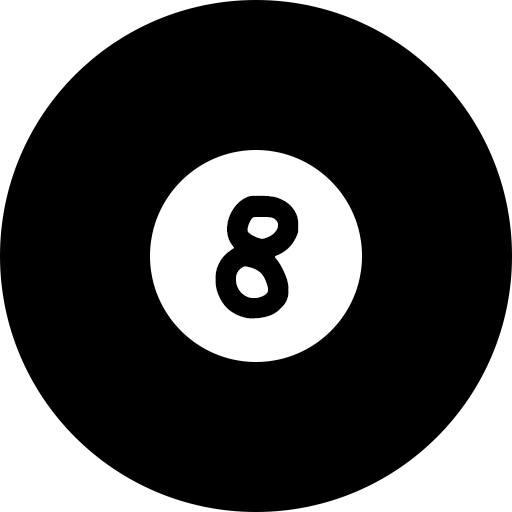
<style>
.page{position:relative;width:512px;height:512px;background:#000000}
.page>*{position:absolute;margin:0}
.t1{font:177.8px "Brutal_bounce-Regular";color:#000000}
</style>
<div class="page">
<p class="t1" style="left:215px;top:195px;width:84px;height:124px">8</p>
</div>
